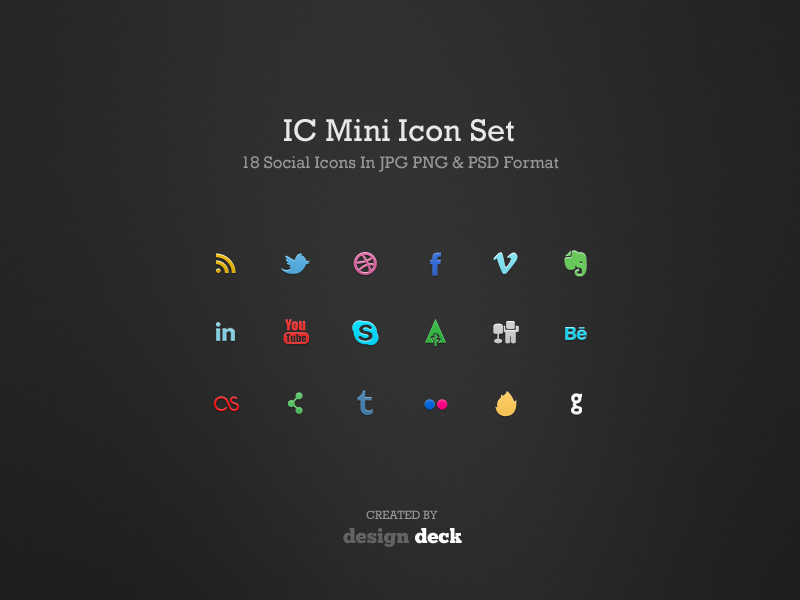
<style>
.page{position:relative;width:800px;height:600px}
.page>*{position:absolute;margin:0}
.t1{font:32px "Rockwell";color:#e8e8e8}
.t2{font:17px "Rockwell";color:#989898}
.t3{font:12px "Rockwell";letter-spacing:-0.015em;color:#989898;text-transform:uppercase}
.t4{font:20px "ChunkFive";letter-spacing:0.005em;color:#626262}
.t5{font:20px "ChunkFive";letter-spacing:0.005em;color:#ffffff}
</style>
<div class="page">
<p class="t1" style="left:284px;top:119px;width:230px;height:23px">IC Mini Icon Set</p>
<p class="t2" style="left:243px;top:156px;width:316px;height:16px">18 Social Icons In JPG PNG &amp; PSD Format</p>
<p class="t3" style="left:366px;top:510px;width:72px;height:9px">Created by</p>
<p class="t4" style="left:343px;top:528px;width:119px;height:19px">design <span class="t5">deck</span></p>
</div>
